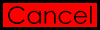
<style>
.page{position:relative;width:100px;height:30px;background:#ff0000}
.page>*{position:absolute;margin:0}
.t1{font:24px "CenturyGothic";color:#000000}
</style>
<div class="page">
<p class="t1" style="left:8px;top:6px;width:84px;height:18px">Cancel</p>
</div>
